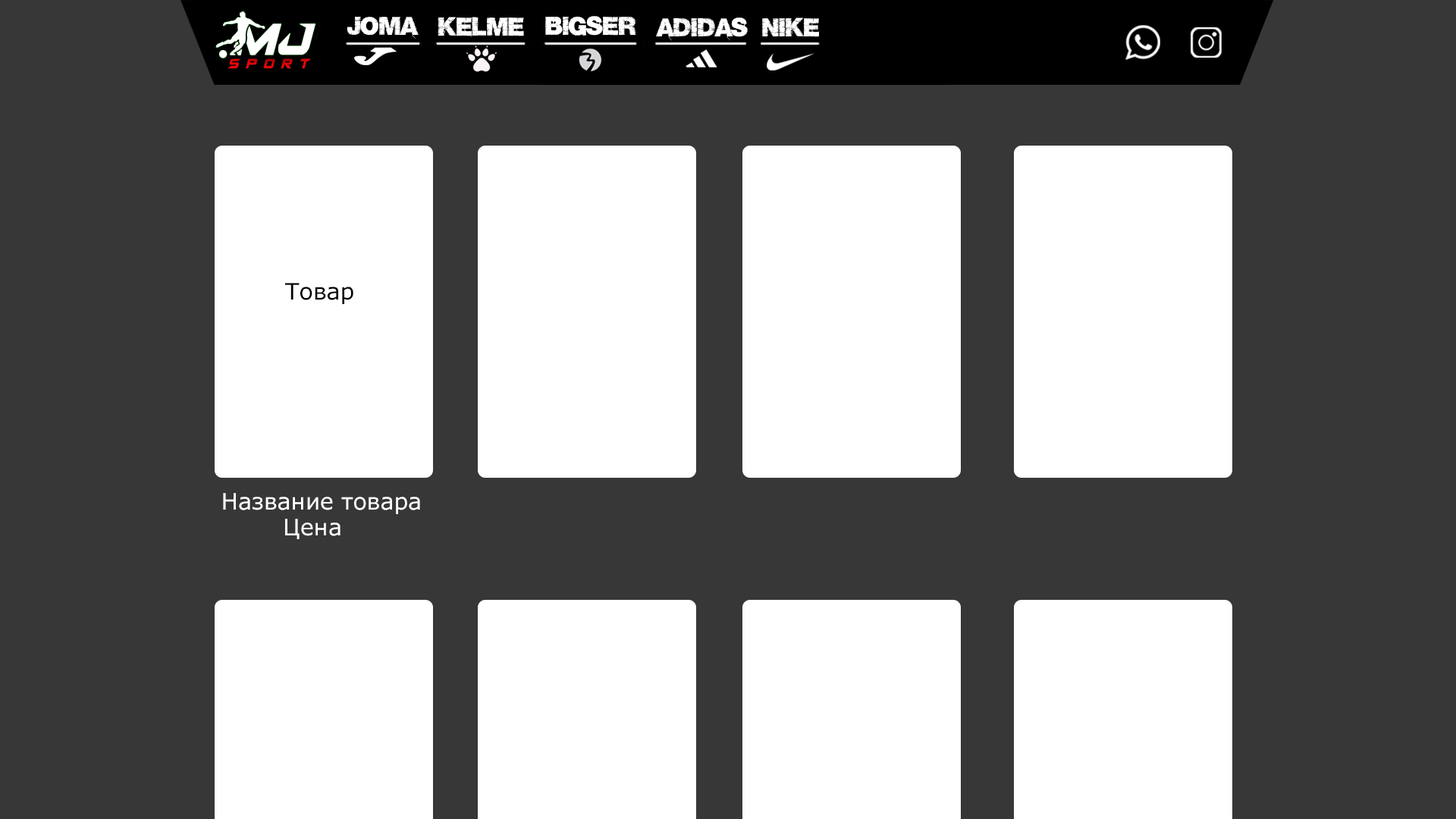
<style>
.page{position:relative;width:1456px;height:819px;background:#373737}
.page>*{position:absolute;margin:0}
.t1{font:22.7px "Base05";color:#ffffff}
.t2{font:22.7px "Verdana";color:#000000}
.t3{font:22.7px "Verdana";color:#ffffff}
</style>
<div class="page">
<p class="t1" style="left:347px;top:17px;width:72px;height:22px">Joma</p>
<p class="t1" style="left:438px;top:17px;width:86px;height:20px">Kelme</p>
<p class="t1" style="left:545px;top:16px;width:91px;height:20px">Bigser</p>
<p class="t1" style="left:656px;top:17px;width:92px;height:24px">Adidas</p>
<p class="t1" style="left:762px;top:17px;width:57px;height:20px">Nike</p>
<p class="t2" style="left:285px;top:283px;width:68px;height:21px">Товар</p>
<p class="t3" style="left:223px;top:493px;width:197px;height:21px">Название товара</p>
<p class="t3" style="left:285px;top:519px;width:55px;height:20px">Цена</p>
</div>
